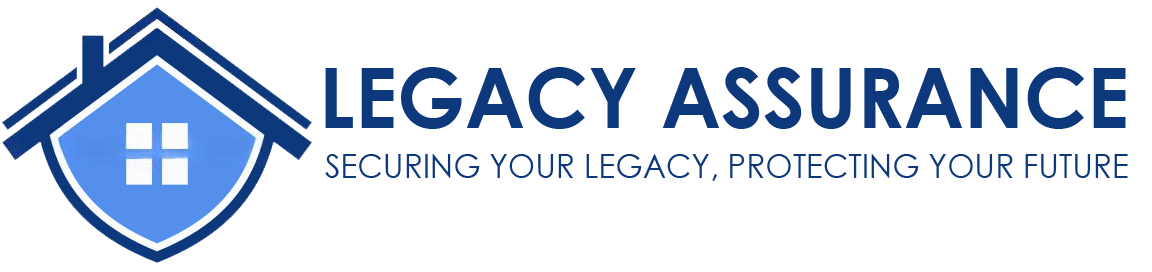
<style>
.page{position:relative;width:1152px;height:272px;background:#ffffff}
.page>*{position:absolute;margin:0}
.t1{font:32.6px "CenturyGothic";color:#0d387c;scale:0.97 1}
</style>
<div class="page">
<p class="t1" style="left:325px;top:154px;width:803px;height:27px">SECURING YOUR LEGACY, PROTECTING YOUR FUTURE</p>
</div>
